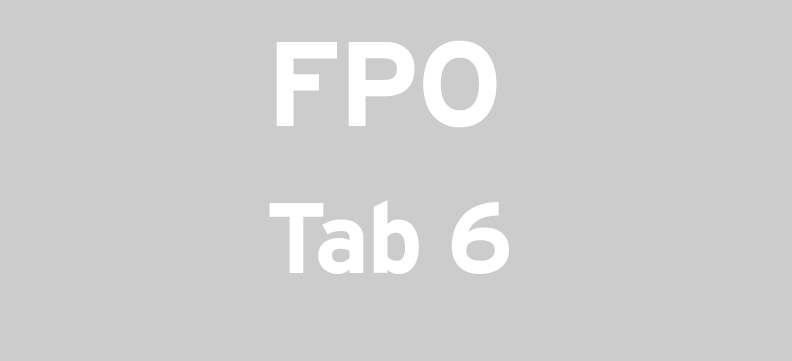
<style>
.page{position:relative;width:792px;height:361px;background:#cccccc}
.page>*{position:absolute;margin:0}
.t1{font:120px "Interstate-Bold";letter-spacing:-0.025em;color:#ffffff}
.t2{font:100px "Interstate-Bold";letter-spacing:-0.025em;color:#ffffff}
</style>
<div class="page">
<p class="t1" style="left:276px;top:40px;width:221px;height:88px">FPO</p>
<p class="t2" style="left:269px;top:200px;width:240px;height:74px">Tab 6</p>
</div>
